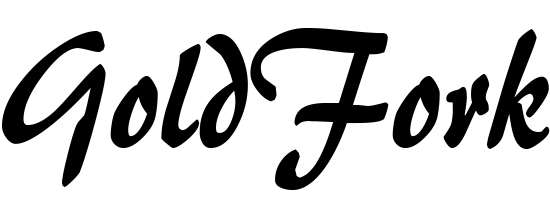
<style>
.page{position:relative;width:550px;height:200px;background:#ffffff}
.page>*{position:absolute;margin:0}
.t1{font:171.7px "ARBERKLEY";color:#000000;scale:0.78 1}
</style>
<div class="page">
<p class="t1" style="left:2px;top:28px;width:548px;height:162px">GoldFork</p>
</div>
